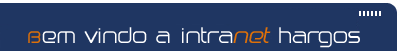
<style>
.page{position:relative;width:406px;height:51px;background:#1f3662}
.page>*{position:absolute;margin:0}
.t1{font:20px "Birdman";color:#ffffff}
.t2{font:20px "Birdman";color:#de7008}
.t3{font:20px "BirdmanOblique";color:#de7008}
</style>
<div class="page">
<p class="t1" style="left:28px;top:27px;width:332px;height:21px"><span class="t2">B</span>em vindo a intra<span class="t3">Net</span> hargos</p>
</div>
